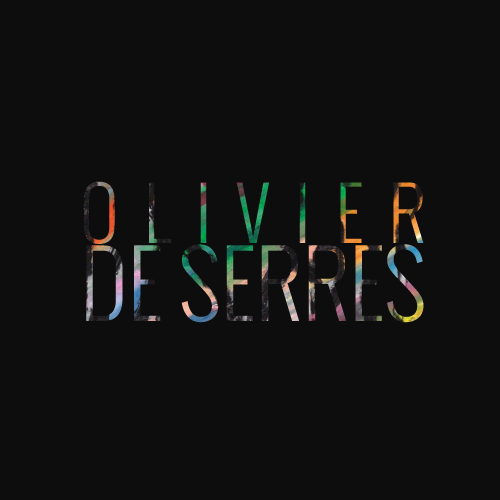
<style>
.page{position:relative;width:500px;height:500px;background:#0d0d0d}
.page>*{position:absolute;margin:0}
.t1{font:90px/78px "Oswald-Light";text-transform:uppercase}
.t2{font:72px/78px "Oswald-Light";text-transform:uppercase}
</style>
<div class="page">
<p class="t1" style="left:83px;top:181px;width:341px;height:142px;text-align:justify"><span class="t2">OLIVIER<br></span>DE SERRES</p>
</div>
